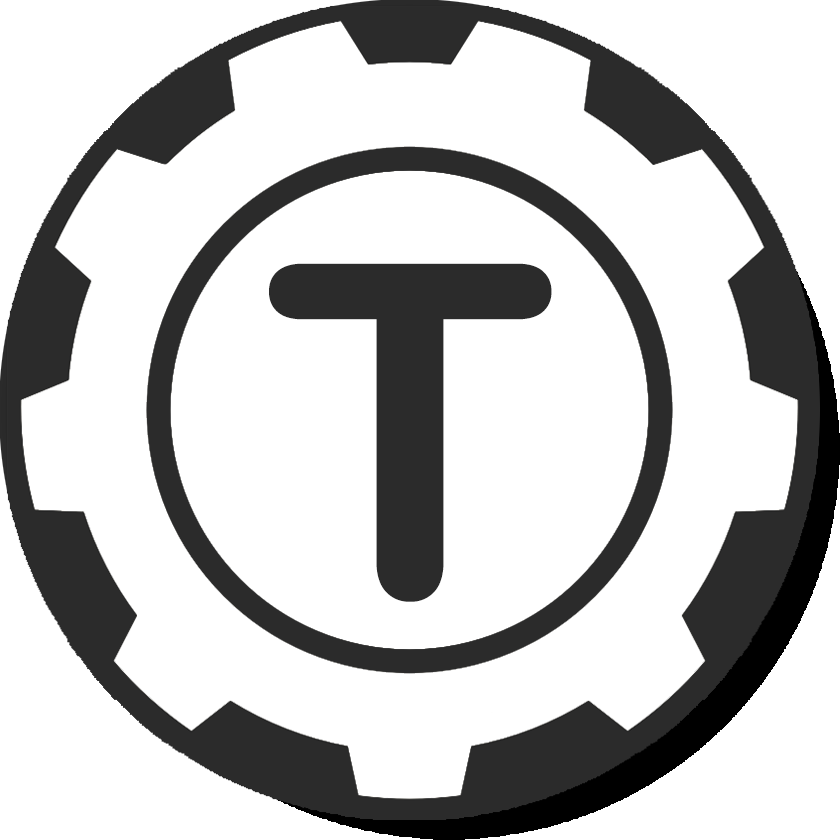
<style>
.page{position:relative;width:840px;height:840px;background:#ffffff}
.page>*{position:absolute;margin:0}
.t1{font:464.3px "ArialRoundedMTBold";color:#2b2b2b}
</style>
<div class="page">
<p class="t1" style="left:269px;top:263px;width:283px;height:339px">T</p>
</div>
